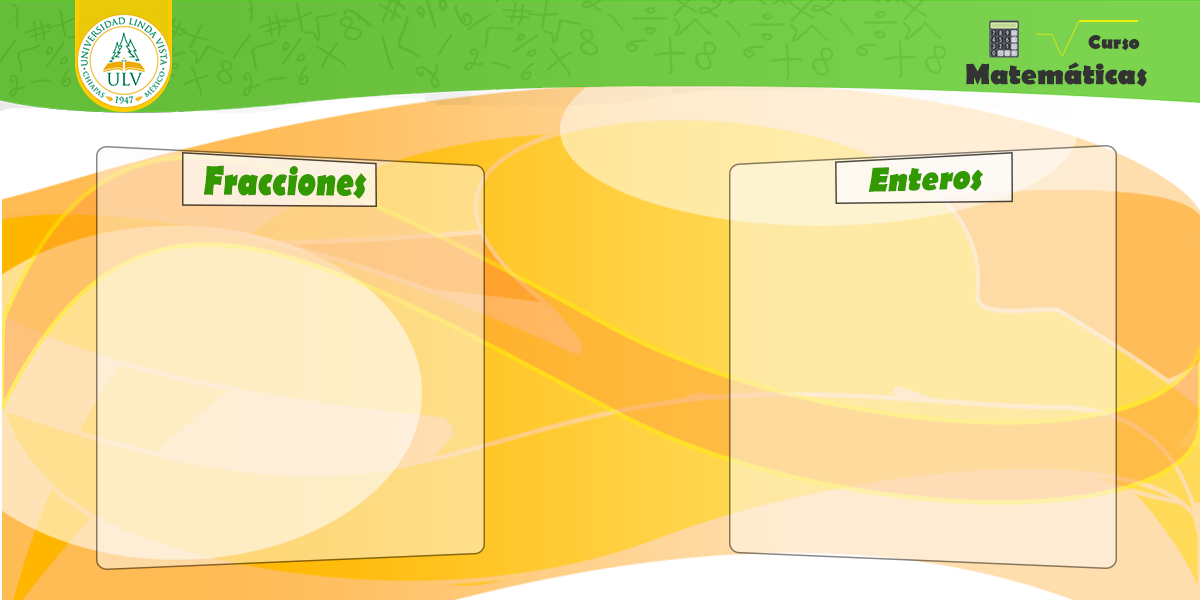
<style>
.page{position:relative;width:1200px;height:600px}
.page>*{position:absolute;margin:0}
.t1{font:29.5px "BerlinSansFB-Bold";color:#333333}
.t2{font:19.7px "BerlinSansFB-Bold";color:#333333}
.t3{font:42.2px "BerlinSansFB-Bold";color:#339900;scale:0.79 1}
.t4{font:36px "BerlinSansFB-Bold";color:#339900;scale:0.9 1}
</style>
<div class="page">
<p class="t1" style="left:966px;top:35px;width:181px;height:52px;text-align:right"><span class="t2">Curso</span> <br>Matemáticas</p>
<p class="t3" style="left:203px;top:165px;width:164px;height:34px">Fracciones</p>
<p class="t4" style="left:868px;top:167px;width:115px;height:25px;rotate:-2deg">Enteros</p>
</div>
